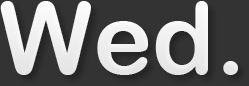
<style>
.page{position:relative;width:249px;height:86px;background:#333333}
.page>*{position:absolute;margin:0}
.t1{font:100px "ArialRoundedMTBold";color:#ffffff}
</style>
<div class="page">
<p class="t1" style="left:0px;top:1px;width:238px;height:74px">Wed.</p>
</div>
